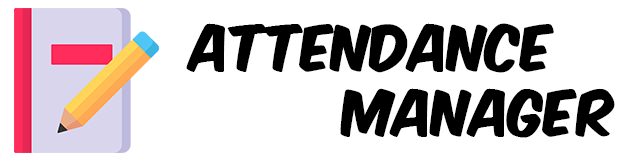
<style>
.page{position:relative;width:640px;height:160px;background:#ffffff}
.page>*{position:absolute;margin:0}
.t1{font:54px "KomikaAxis";color:#000000}
</style>
<div class="page">
<p class="t1" style="left:186px;top:23px;width:429px;height:115px;text-align:center">Attendance<br>      Manager</p>
</div>
